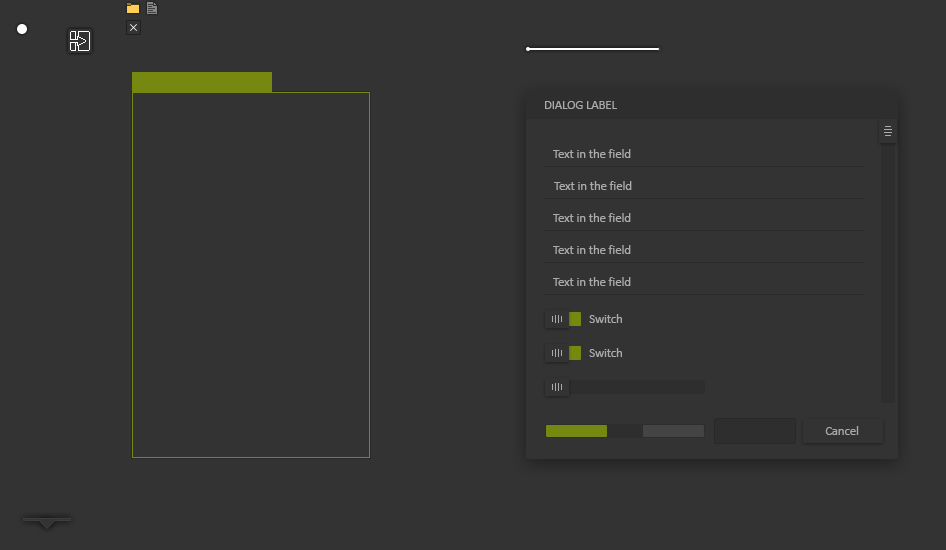
<style>
.page{position:relative;width:946px;height:550px;background:#333333}
.page>*{position:absolute;margin:0}
.t1{font:12.5px "Calibri";color:#aaaaaa}
</style>
<div class="page">
<p class="t1" style="left:545px;top:101px;width:72px;height:8px">DIALOG LABEL</p>
<p class="t1" style="left:553px;top:149px;width:78px;height:9px">Text in the field</p>
<p class="t1" style="left:554px;top:181px;width:78px;height:9px">Text in the field</p>
<p class="t1" style="left:553px;top:213px;width:78px;height:9px">Text in the field</p>
<p class="t1" style="left:553px;top:245px;width:78px;height:9px">Text in the field</p>
<p class="t1" style="left:553px;top:277px;width:78px;height:9px">Text in the field</p>
<p class="t1" style="left:589px;top:314px;width:33px;height:9px">Switch</p>
<p class="t1" style="left:589px;top:348px;width:33px;height:9px">Switch</p>
<p class="t1" style="left:825px;top:426px;width:34px;height:9px">Cancel</p>
</div>
